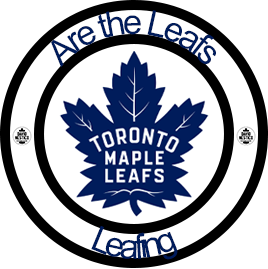
<style>
.page{position:relative;width:268px;height:269px;background:#ffffff}
.page>*{position:absolute;margin:0}
.t1{font:34.8px "ArialMT";letter-spacing:-0.1em;color:#001c5b}
</style>
<div class="page">
<p class="t1" style="left:51px;top:10px;width:165px;height:57px">Are the Leafs</p>
<p class="t1" style="left:91px;top:226px;width:87px;height:34px">Leafing</p>
</div>
